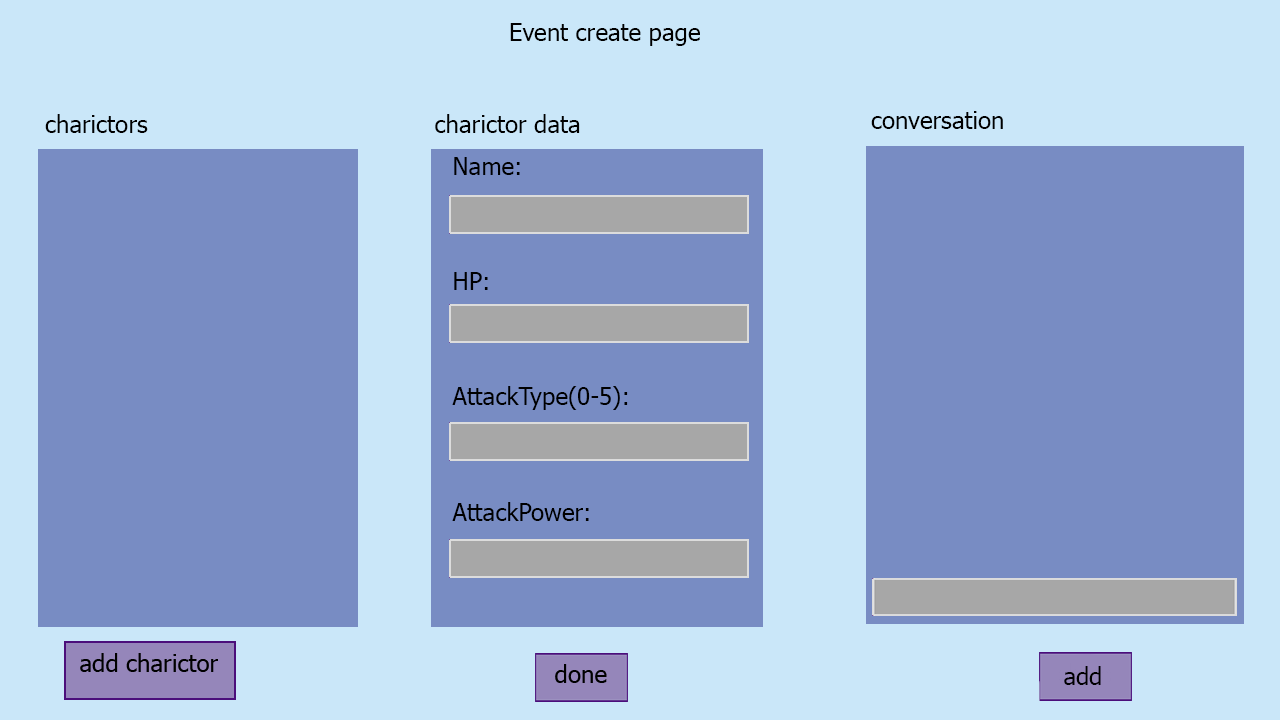
<style>
.page{position:relative;width:1280px;height:720px;background:#788cc3}
.page>*{position:absolute;margin:0}
.t1{font:24px "Tahoma";color:#000000}
</style>
<div class="page">
<p class="t1" style="left:510px;top:23px;width:190px;height:23px">Event create page</p>
<p class="t1" style="left:871px;top:111px;width:132px;height:18px">conversation</p>
<p class="t1" style="left:45px;top:114px;width:103px;height:19px">charictors</p>
<p class="t1" style="left:435px;top:114px;width:145px;height:19px">charictor data</p>
<p class="t1" style="left:452px;top:157px;width:176px;height:364px">Name:<br><br><br><br>HP:<br><br><br><br>AttackType(0-5):<br><br><br><br>AttackPower:</p>
</div>
